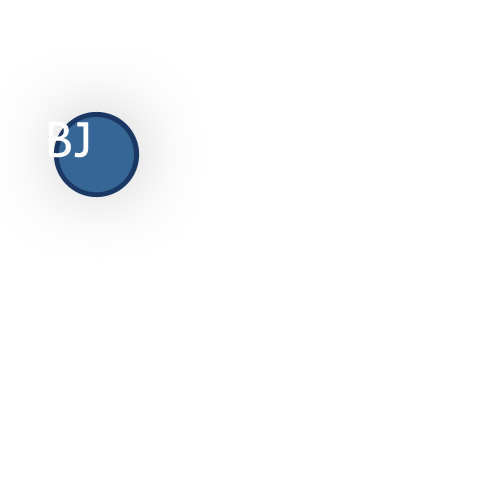
<style>
.page{position:relative;width:500px;height:500px;background:#ffffff}
.page>*{position:absolute;margin:0}
.t1{font:48px "Aller";color:#ffffff}
</style>
<div class="page">
<p class="t1" style="left:48px;top:121px;width:41px;height:37px">BJ</p>
</div>
